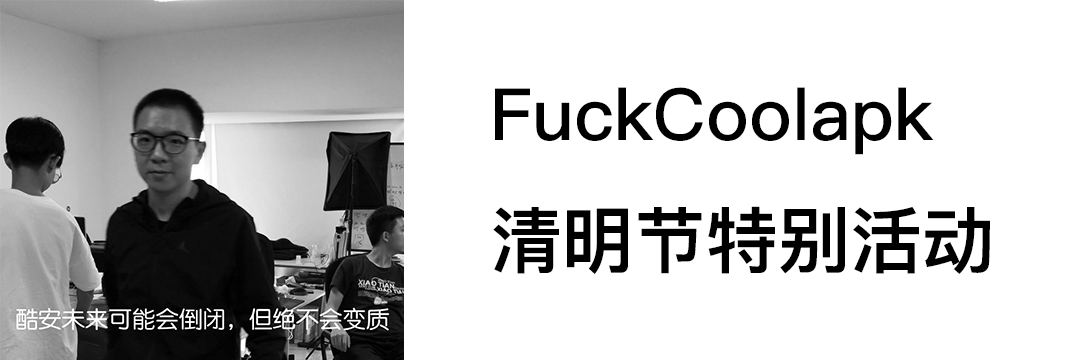
<style>
.page{position:relative;width:1080px;height:360px;background:#ffffff}
.page>*{position:absolute;margin:0}
.t1{font:72px "PingFangHK-Medium";color:#000000}
.t2{font:72px "PingFangHK-Semibold";color:#000000}
</style>
<div class="page">
<p class="t1" style="left:493px;top:87px;width:497px;height:188px">FuckCoolapk<br><span class="t2">清明节特别活动</span></p>
</div>
